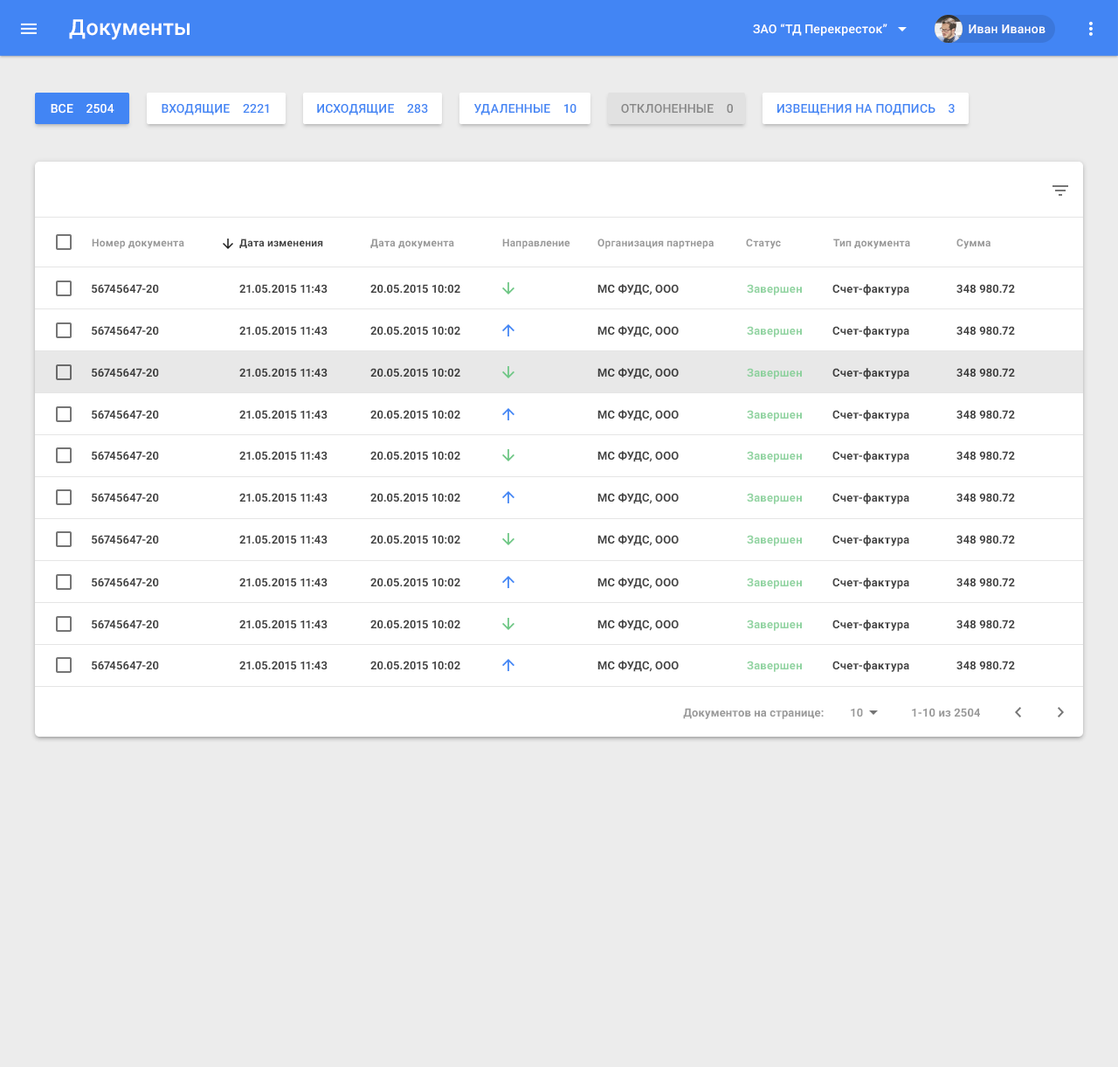
<style>
.page{position:relative;width:1118px;height:1067px;background:#ffffff}
.page>*{position:absolute;margin:0}
.t1{font:21.8px "Roboto-Medium";letter-spacing:0.01em;color:#ffffff}
.t2{font:12.2px "Roboto-Medium";letter-spacing:0.01em;color:#ffffff}
.t3{font:12.2px "Roboto-Medium";letter-spacing:0.01em;color:#4285f4}
.t4{font:12.2px "Roboto-Medium";letter-spacing:0.01em;color:#878787}
.t5{font:10.5px "Roboto-Bold";letter-spacing:0.01em;color:#999999}
.t6{font:10.5px "Roboto-Bold";letter-spacing:0.01em;color:#424242}
.t7{font:11.4px "Roboto-Bold";letter-spacing:0.01em;color:#424242}
.t8{font:11.4px "Roboto-Bold";letter-spacing:0.01em;color:#7ecd92}
.t9{font:11.4px "Roboto-Bold";letter-spacing:0.01em;color:#3c3c3c}
.t10{font:11.4px "Roboto-Bold";letter-spacing:0.01em;color:#999999}
</style>
<div class="page">
<p class="t1" style="left:69px;top:19px;width:121px;height:21px">Документы</p>
<p class="t2" style="left:753px;top:24px;width:134px;height:12px">ЗАО “ТД Перекресток”</p>
<p class="t2" style="left:969px;top:24px;width:77px;height:10px">Иван Иванов</p>
<p class="t2" style="left:51px;top:104px;width:63px;height:10px">ВСЕ    2504</p>
<p class="t3" style="left:162px;top:104px;width:107px;height:11px">ВХОДЯЩИЕ    2221</p>
<p class="t3" style="left:317px;top:104px;width:111px;height:11px">ИСХОДЯЩИЕ    283</p>
<p class="t3" style="left:474px;top:104px;width:102px;height:11px">УДАЛЕННЫЕ    10</p>
<p class="t4" style="left:621px;top:104px;width:112px;height:10px">ОТКЛОНЕННЫЕ    0</p>
<p class="t3" style="left:777px;top:104px;width:178px;height:11px">ИЗВЕЩЕНИЯ НА ПОДПИСЬ    3</p>
<p class="t5" style="left:92px;top:238px;width:92px;height:11px">Номер документа</p>
<p class="t6" style="left:239px;top:238px;width:84px;height:10px">Дата изменения</p>
<p class="t5" style="left:370px;top:238px;width:84px;height:11px">Дата документа</p>
<p class="t5" style="left:502px;top:238px;width:68px;height:11px">Направление</p>
<p class="t5" style="left:597px;top:238px;width:117px;height:11px">Организация партнера</p>
<p class="t5" style="left:746px;top:238px;width:35px;height:11px">Статус</p>
<p class="t5" style="left:833px;top:238px;width:77px;height:11px">Тип документа</p>
<p class="t5" style="left:956px;top:238px;width:35px;height:11px">Сумма</p>
<p class="t7" style="left:92px;top:284px;width:67px;height:9px">56745647-20</p>
<p class="t7" style="left:239px;top:284px;width:89px;height:9px">21.05.2015 11:43</p>
<p class="t7" style="left:370px;top:284px;width:90px;height:9px">20.05.2015 10:02</p>
<p class="t7" style="left:597px;top:284px;width:82px;height:11px">МС ФУДС, ООО</p>
<p class="t8" style="left:747px;top:284px;width:55px;height:11px;opacity:0.87">Завершен</p>
<p class="t7" style="left:832px;top:284px;width:77px;height:11px">Счет-фактура</p>
<p class="t7" style="left:956px;top:284px;width:59px;height:9px">348 980.72</p>
<p class="t7" style="left:92px;top:326px;width:67px;height:9px">56745647-20</p>
<p class="t7" style="left:239px;top:326px;width:89px;height:9px">21.05.2015 11:43</p>
<p class="t7" style="left:370px;top:326px;width:90px;height:9px">20.05.2015 10:02</p>
<p class="t7" style="left:597px;top:326px;width:82px;height:11px">МС ФУДС, ООО</p>
<p class="t8" style="left:747px;top:326px;width:55px;height:11px;opacity:0.87">Завершен</p>
<p class="t7" style="left:832px;top:326px;width:77px;height:11px">Счет-фактура</p>
<p class="t7" style="left:956px;top:326px;width:59px;height:9px">348 980.72</p>
<p class="t9" style="left:92px;top:368px;width:67px;height:8px">56745647-20</p>
<p class="t9" style="left:239px;top:368px;width:89px;height:8px">21.05.2015 11:43</p>
<p class="t9" style="left:370px;top:368px;width:90px;height:8px">20.05.2015 10:02</p>
<p class="t9" style="left:597px;top:368px;width:82px;height:11px">МС ФУДС, ООО</p>
<p class="t8" style="left:747px;top:368px;width:55px;height:11px;opacity:0.87">Завершен</p>
<p class="t9" style="left:832px;top:368px;width:77px;height:11px">Счет-фактура</p>
<p class="t9" style="left:956px;top:368px;width:59px;height:8px">348 980.72</p>
<p class="t7" style="left:92px;top:410px;width:67px;height:8px">56745647-20</p>
<p class="t7" style="left:239px;top:410px;width:89px;height:8px">21.05.2015 11:43</p>
<p class="t7" style="left:370px;top:410px;width:90px;height:8px">20.05.2015 10:02</p>
<p class="t7" style="left:597px;top:410px;width:82px;height:11px">МС ФУДС, ООО</p>
<p class="t8" style="left:747px;top:410px;width:55px;height:11px;opacity:0.87">Завершен</p>
<p class="t7" style="left:832px;top:410px;width:77px;height:11px">Счет-фактура</p>
<p class="t7" style="left:956px;top:410px;width:59px;height:8px">348 980.72</p>
<p class="t7" style="left:92px;top:451px;width:67px;height:8px">56745647-20</p>
<p class="t7" style="left:239px;top:451px;width:89px;height:8px">21.05.2015 11:43</p>
<p class="t7" style="left:370px;top:451px;width:90px;height:8px">20.05.2015 10:02</p>
<p class="t7" style="left:597px;top:451px;width:82px;height:11px">МС ФУДС, ООО</p>
<p class="t8" style="left:747px;top:451px;width:55px;height:11px;opacity:0.87">Завершен</p>
<p class="t7" style="left:832px;top:451px;width:77px;height:11px">Счет-фактура</p>
<p class="t7" style="left:956px;top:451px;width:59px;height:8px">348 980.72</p>
<p class="t7" style="left:92px;top:493px;width:67px;height:8px">56745647-20</p>
<p class="t7" style="left:239px;top:493px;width:89px;height:8px">21.05.2015 11:43</p>
<p class="t7" style="left:370px;top:493px;width:90px;height:8px">20.05.2015 10:02</p>
<p class="t7" style="left:597px;top:493px;width:82px;height:11px">МС ФУДС, ООО</p>
<p class="t8" style="left:747px;top:493px;width:55px;height:11px;opacity:0.87">Завершен</p>
<p class="t7" style="left:832px;top:493px;width:77px;height:11px">Счет-фактура</p>
<p class="t7" style="left:956px;top:493px;width:59px;height:8px">348 980.72</p>
<p class="t7" style="left:92px;top:535px;width:67px;height:8px">56745647-20</p>
<p class="t7" style="left:239px;top:535px;width:89px;height:8px">21.05.2015 11:43</p>
<p class="t7" style="left:370px;top:535px;width:90px;height:8px">20.05.2015 10:02</p>
<p class="t7" style="left:597px;top:535px;width:82px;height:11px">МС ФУДС, ООО</p>
<p class="t8" style="left:747px;top:535px;width:55px;height:11px;opacity:0.87">Завершен</p>
<p class="t7" style="left:832px;top:535px;width:77px;height:11px">Счет-фактура</p>
<p class="t7" style="left:956px;top:535px;width:59px;height:8px">348 980.72</p>
<p class="t7" style="left:92px;top:577px;width:67px;height:9px">56745647-20</p>
<p class="t7" style="left:239px;top:577px;width:89px;height:9px">21.05.2015 11:43</p>
<p class="t7" style="left:370px;top:577px;width:90px;height:9px">20.05.2015 10:02</p>
<p class="t7" style="left:597px;top:577px;width:82px;height:12px">МС ФУДС, ООО</p>
<p class="t8" style="left:747px;top:577px;width:55px;height:12px;opacity:0.87">Завершен</p>
<p class="t7" style="left:832px;top:577px;width:77px;height:12px">Счет-фактура</p>
<p class="t7" style="left:956px;top:577px;width:59px;height:9px">348 980.72</p>
<p class="t7" style="left:92px;top:619px;width:67px;height:9px">56745647-20</p>
<p class="t7" style="left:239px;top:619px;width:89px;height:9px">21.05.2015 11:43</p>
<p class="t7" style="left:370px;top:619px;width:90px;height:9px">20.05.2015 10:02</p>
<p class="t7" style="left:597px;top:619px;width:82px;height:12px">МС ФУДС, ООО</p>
<p class="t8" style="left:747px;top:619px;width:55px;height:12px;opacity:0.87">Завершен</p>
<p class="t7" style="left:832px;top:619px;width:77px;height:12px">Счет-фактура</p>
<p class="t7" style="left:956px;top:619px;width:59px;height:9px">348 980.72</p>
<p class="t7" style="left:92px;top:660px;width:67px;height:9px">56745647-20</p>
<p class="t7" style="left:239px;top:660px;width:89px;height:9px">21.05.2015 11:43</p>
<p class="t7" style="left:370px;top:660px;width:90px;height:9px">20.05.2015 10:02</p>
<p class="t7" style="left:597px;top:660px;width:82px;height:12px">МС ФУДС, ООО</p>
<p class="t8" style="left:747px;top:660px;width:55px;height:12px;opacity:0.87">Завершен</p>
<p class="t7" style="left:832px;top:660px;width:77px;height:12px">Счет-фактура</p>
<p class="t7" style="left:956px;top:660px;width:59px;height:9px">348 980.72</p>
<p class="t10" style="left:683px;top:708px;width:141px;height:11px">Документов на странице:</p>
<p class="t10" style="left:851px;top:708px;width:12px;height:8px">10</p>
<p class="t10" style="left:912px;top:708px;width:68px;height:8px">1-10 из 2504</p>
</div>
